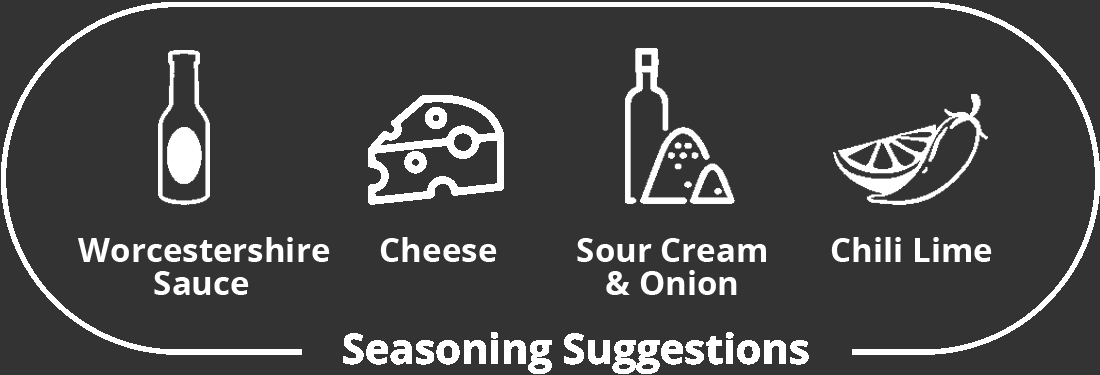
<style>
.page{position:relative;width:1100px;height:375px;background:#333333}
.page>*{position:absolute;margin:0}
.t1{font:33px "OpenSans-Bold";color:#ffffff}
</style>
<div class="page">
<p class="t1" style="left:78px;top:237px;width:252px;height:25px">Worcestershire</p>
<p class="t1" style="left:380px;top:237px;width:117px;height:25px">Cheese</p>
<p class="t1" style="left:577px;top:238px;width:189px;height:24px">Sour Cream</p>
<p class="t1" style="left:831px;top:237px;width:161px;height:25px">Chili Lime</p>
<p class="t1" style="left:606px;top:270px;width:131px;height:25px">&amp; Onion</p>
<p class="t1" style="left:154px;top:271px;width:95px;height:24px">Sauce</p>
</div>
